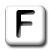
<style>
.page{position:relative;width:50px;height:50px;background:#ffffff}
.page>*{position:absolute;margin:0}
.t1{font:40px "Odin-Bold"}
</style>
<div class="page">
<p class="t1" style="left:16px;top:10px;width:19px;height:28px">F</p>
</div>
